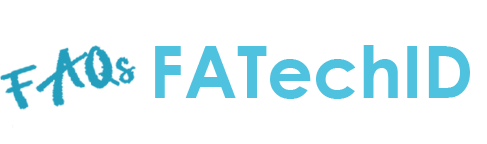
<style>
.page{position:relative;width:487px;height:144px;background:#ffffff}
.page>*{position:absolute;margin:0}
.t1{font:72px "CenturyGothic-Bold";color:#4ec2df}
</style>
<div class="page">
<p class="t1" style="left:155px;top:45px;width:315px;height:54px">FATechID</p>
</div>
